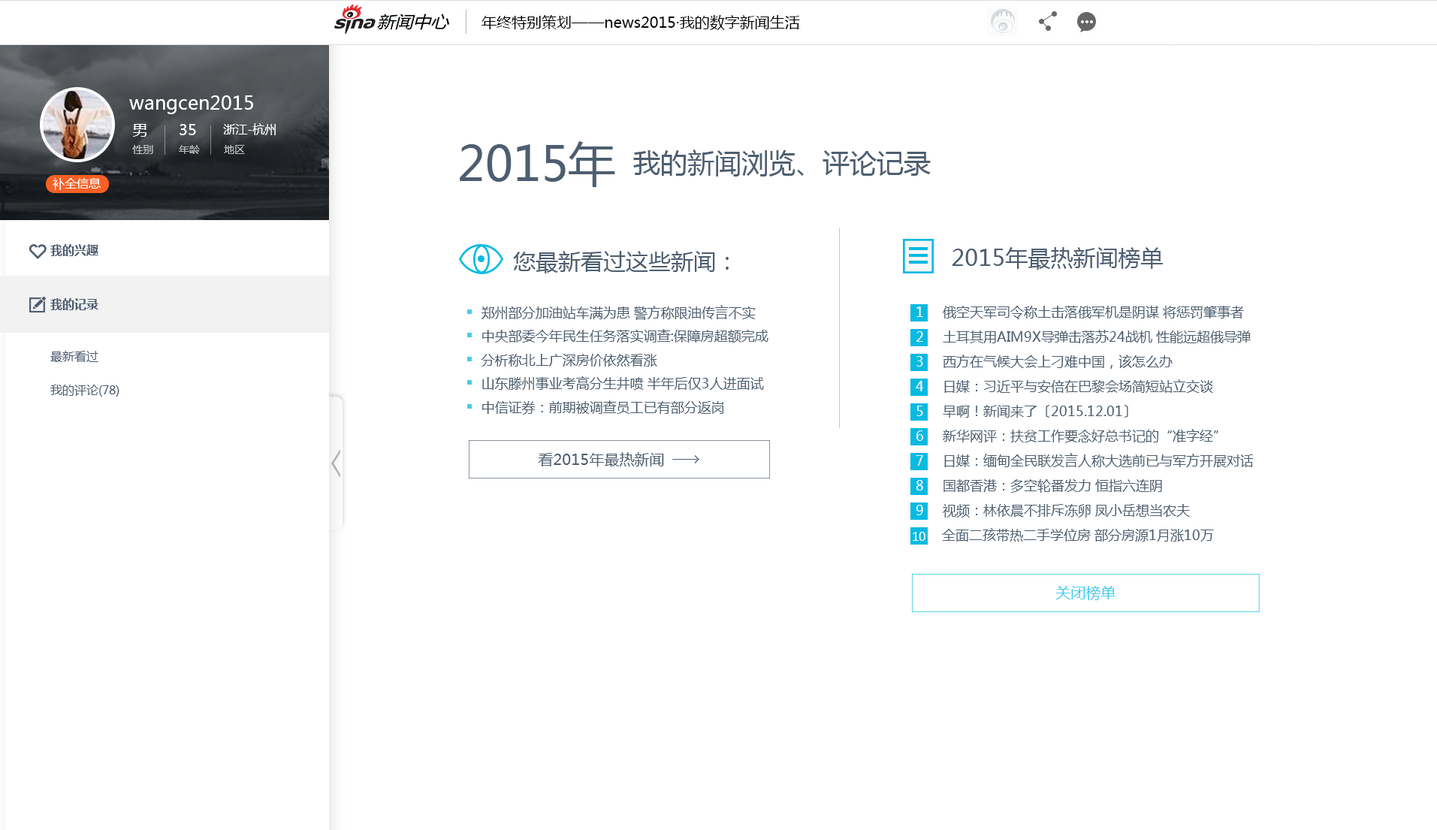
<style>
.page{position:relative;width:1437px;height:830px;background:#ffffff}
.page>*{position:absolute;margin:0}
.t1{font:15px "MicrosoftYaHei";color:#000000}
.t2{font:18.8px "MicrosoftYaHei";color:#ffffff}
.t3{font:10.5px/21.8px "MicrosoftYaHei";color:#c2c2c2}
.t4{font:15px/21.8px "MicrosoftYaHei";color:#ffffff}
.t5{font:12px "MicrosoftYaHei";color:#ffffff}
.t6{font:10.5px "MicrosoftYaHei";color:#c2c2c2}
.t7{font:15px "MicrosoftYaHei";color:#ffffff}
.t8{font:47.3px "MicrosoftYaHei";color:#4d5e70}
.t9{font:27px "MicrosoftYaHei";color:#4d5e70}
.t10{font:12px "MicrosoftYaHei-Bold";color:#4d5e70}
.t11{font:22.5px "MicrosoftYaHei";color:#4d5e70}
.t12{font:13.5px "MicrosoftYaHei";color:#4d5e70}
.t13{font:22.5px "MicrosoftYaHei-Bold";color:#4d5e70}
.t14{font:13.5px/24.8px "MicrosoftYaHei";color:#4d5e70}
.t15{font:13.5px/24.8px "MicrosoftYaHei";color:#f6f6f6}
.t16{font:12px "MicrosoftYaHei";color:#4d5e70}
.t17{font:15px "MicrosoftYaHei";color:#4d5e70}
.t18{font:15px "MicrosoftYaHei";color:#46ccea}
</style>
<div class="page">
<p class="t1" style="left:481px;top:15px;width:319px;height:15px">年终特别策划——news2015·我的数字新闻生活</p>
<p class="t2" style="left:129px;top:95px;width:124px;height:19px">wangcen2015</p>
<p class="t3" style="left:132px;top:124px;width:21px;height:30px"><span class="t4">男<br></span>性别</p>
<p class="t4" style="left:179px;top:124px;width:21px;height:30px">35<br><span class="t3">年龄</span></p>
<p class="t5" style="left:223px;top:123px;width:53px;height:12px">浙江-杭州</p>
<p class="t6" style="left:224px;top:145px;width:21px;height:9px"><span class="t7"><br></span>地区</p>
<p class="t8" style="left:460px;top:141px;width:155px;height:46px">2015年</p>
<p class="t9" style="left:633px;top:149px;width:298px;height:28px">我的新闻浏览、评论记录</p>
<p class="t5" style="left:53px;top:178px;width:48px;height:12px">补全信息</p>
<p class="t10" style="left:50px;top:244px;width:48px;height:12px">我的兴趣</p>
<p class="t11" style="left:513px;top:251px;width:216px;height:22px">您最新看过这些新闻：</p>
<p class="t11" style="left:952px;top:247px;width:211px;height:23px">2015年最热新闻榜单</p>
<p class="t10" style="left:50px;top:298px;width:48px;height:12px">我的记录</p>
<p class="t12" style="left:481px;top:305px;width:287px;height:110px"><span class="t13"><br></span>郑州部分加油站车满为患 警方称限油传言不实<br>中央部委今年民生任务落实调查:保障房超额完成<br>分析称北上广深房价依然看涨<br>山东滕州事业考高分生井喷 半年后仅3人进面试<br>中信证券：前期被调查员工已有部分返岗</p>
<p class="t14" style="left:916px;top:306px;width:338px;height:236px"><span class="t15">1</span>     俄空天军司令称土击落俄军机是阴谋 将惩罚肇事者<br><span class="t15">2</span>     土耳其用AIM9X导弹击落苏24战机 性能远超俄导弹<br><span class="t15">3</span>     西方在气候大会上刁难中国，该怎么办<br><span class="t15">4</span>     日媒：习近平与安倍在巴黎会场简短站立交谈<br><span class="t15">5 </span>    早啊！新闻来了〔2015.12.01〕<br><span class="t15">6 </span>    新华网评：扶贫工作要念好总书记的“准字经”<br><span class="t15">7</span>     日媒：缅甸全民联发言人称大选前已与军方开展对话<br><span class="t15">8</span>     国都香港：多空轮番发力 恒指六连阴<br><span class="t15">9</span>     视频：林依晨不排斥冻卵 凤小岳想当农夫<br>       全面二孩带热二手学位房 部分房源1月涨10万</p>
<p class="t16" style="left:50px;top:351px;width:48px;height:11px">最新看过</p>
<p class="t16" style="left:50px;top:385px;width:69px;height:12px">我的评论(78)</p>
<p class="t17" style="left:538px;top:452px;width:126px;height:14px">看2015年最热新闻</p>
<p class="t5" style="left:913px;top:532px;width:12px;height:9px">10</p>
<p class="t18" style="left:1055px;top:586px;width:60px;height:14px">关闭榜单</p>
</div>
